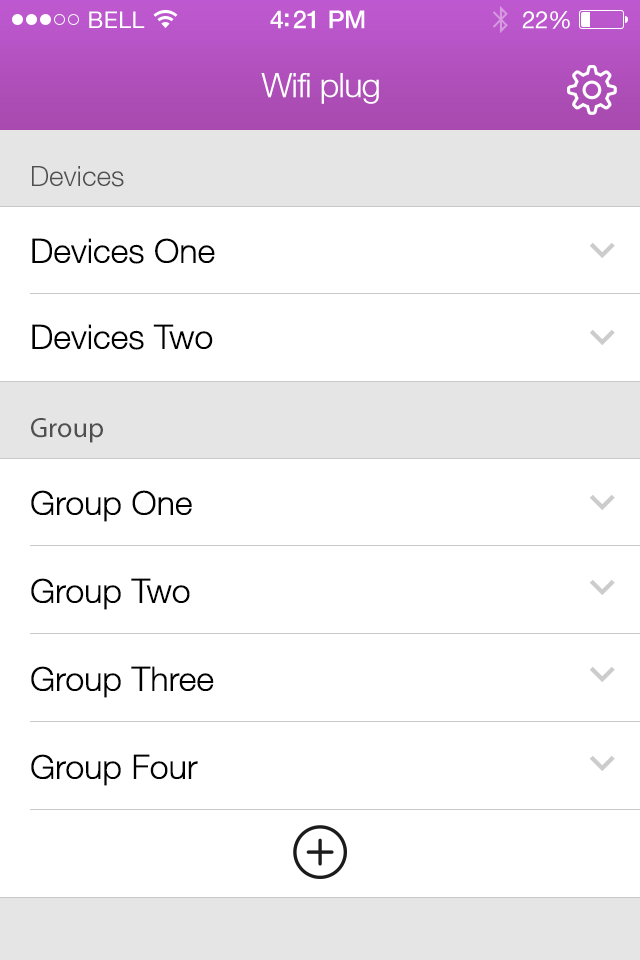
<style>
.page{position:relative;width:640px;height:960px;background:#ffffff}
.page>*{position:absolute;margin:0}
.t1{font:34px "HelveticaNeueLT-Light";letter-spacing:-0.02em;color:#ffffff}
.t2{font:28px "HelveticaNeueLT-Light";color:#4f4f4f}
.t3{font:34px "HelveticaNeueLT-Light";color:#000000}
.t4{font:28px "MyriadPro-Regular";color:#4f4f4f}
.t5{font:34px/88px "HelveticaNeueLT-Light";color:#000000}
</style>
<div class="page">
<p class="t1" style="left:261px;top:73px;width:118px;height:31px">Wifi plug</p>
<p class="t2" style="left:32px;top:166px;width:92px;height:21px">Devices</p>
<p class="t3" style="left:32px;top:238px;width:183px;height:26px">Devices One</p>
<p class="t3" style="left:32px;top:324px;width:181px;height:26px">Devices Two</p>
<p class="t4" style="left:31px;top:418px;width:72px;height:25px">Group</p>
<p class="t5" style="left:31px;top:490px;width:183px;height:296px">Group One<br>Group Two<br>Group Three<br>Group Four</p>
</div>
